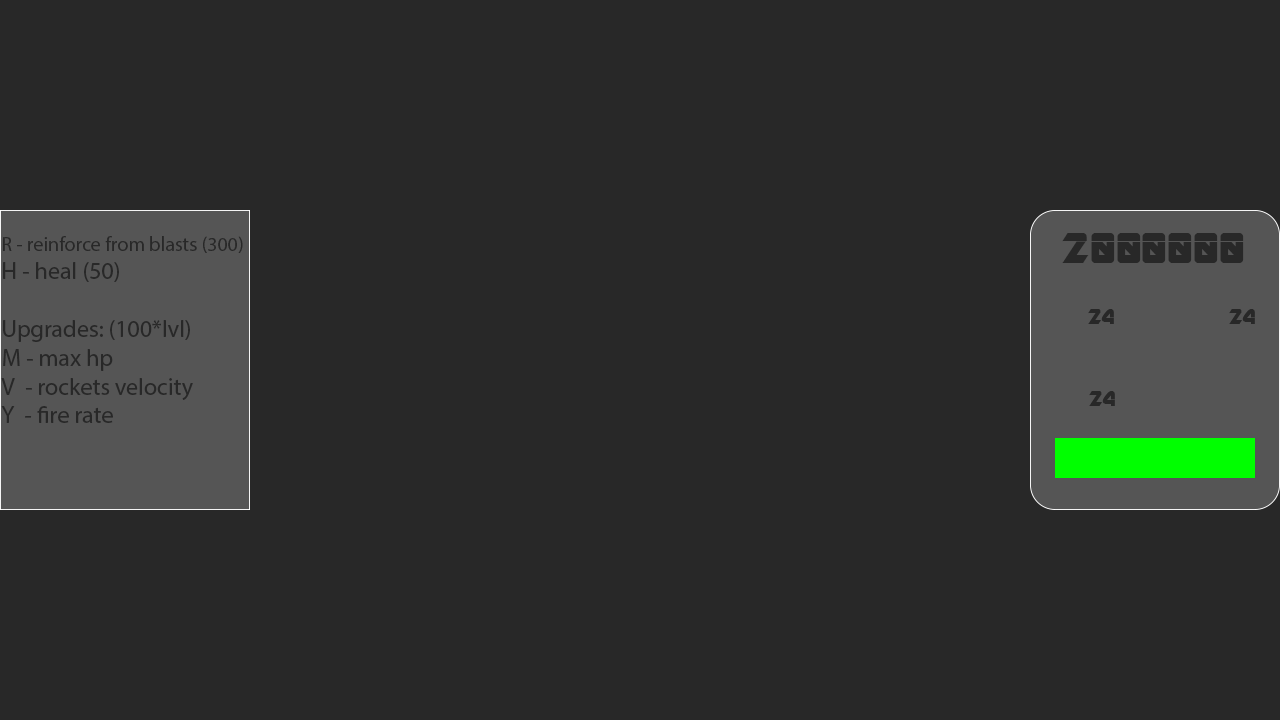
<style>
.page{position:relative;width:1280px;height:720px;background:#282828}
.page>*{position:absolute;margin:0}
.t1{font:48px "ARDESTINE";color:#282828}
.t2{font:24px "MyriadPro-Regular";color:#282828}
.t3{font:20px "MyriadPro-Regular";color:#282828}
.t4{font:24px "ARDESTINE";color:#282828}
</style>
<div class="page">
<p class="t1" style="left:1062px;top:233px;width:182px;height:30px">2000000</p>
<p class="t2" style="left:1px;top:236px;width:242px;height:187px"><span class="t3"><br>R - reinforce from blasts (300)<br></span>H - heal (50)<br><br>Upgrades: (100*lvl)<br>M - max hp<br>V  - rockets velocity<br>Y  - fire rate</p>
<p class="t4" style="left:1088px;top:309px;width:26px;height:15px">24</p>
<p class="t4" style="left:1229px;top:309px;width:26px;height:15px">24</p>
<p class="t4" style="left:1089px;top:391px;width:26px;height:15px">24</p>
</div>
